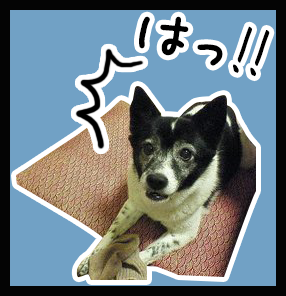
<style>
.page{position:relative;width:286px;height:296px;background:#71a1c5}
.page>*{position:absolute;margin:0}
.t1{font:72.9px "APJapanesefont";color:#000000}
</style>
<div class="page">
<p class="t1" style="left:139px;top:16px;width:131px;height:61px;rotate:11deg">はっ!!</p>
</div>
